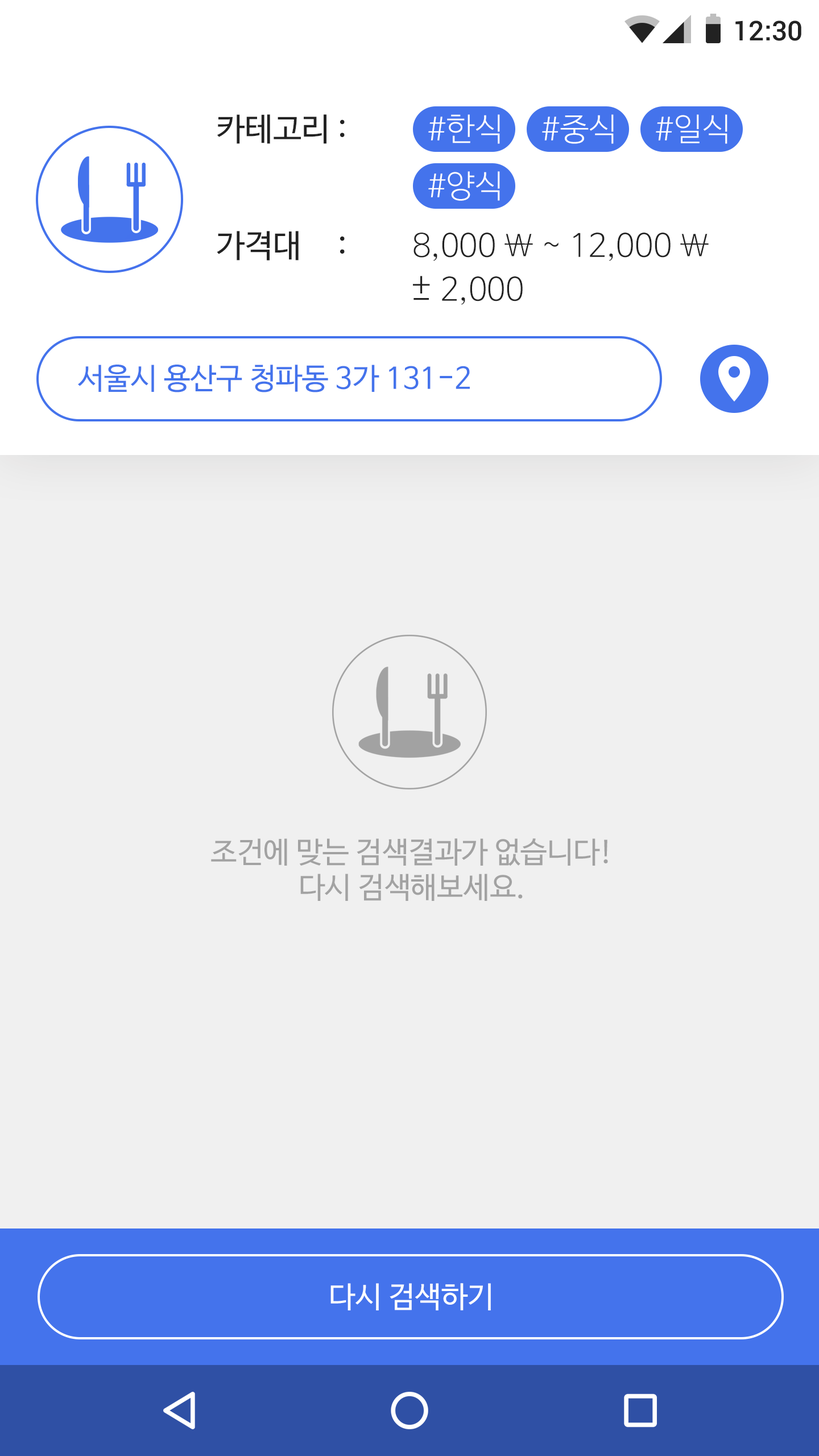
<style>
.page{position:relative;width:819px;height:1456px;background:#f0f0f0}
.page>*{position:absolute;margin:0}
.t1{font:27.3px "Roboto-Medium";color:#222222}
.t2{font:31.8px "NanumBarunGothic";color:#222222}
.t3{font:31.8px "NanumBarunGothicLight";color:#ffffff}
.t4{font:31.8px "NanumBarunGothicLight";color:#222222}
.t5{font:36.4px "NanumBarunGothicLight";color:#222222}
.t6{font:29.6px "NanumBarunGothic";color:#4473ec}
.t7{font:29.6px "NanumBarunGothic";color:#a2a2a2}
.t8{font:29.6px "NanumBarunGothic";color:#ffffff}
</style>
<div class="page">
<p class="t1" style="left:735px;top:20px;width:66px;height:21px">12:30</p>
<p class="t2" style="left:217px;top:114px;width:128px;height:30px">카테고리 :</p>
<p class="t3" style="left:428px;top:114px;width:72px;height:30px">#한식</p>
<p class="t3" style="left:542px;top:114px;width:72px;height:30px">#중식</p>
<p class="t3" style="left:656px;top:114px;width:71px;height:30px">#일식</p>
<p class="t3" style="left:428px;top:171px;width:72px;height:30px">#양식</p>
<p class="t2" style="left:217px;top:231px;width:128px;height:29px">가격대     :</p>
<p class="t4" style="left:413px;top:233px;width:296px;height:28px">8,000 \ ~ 12,000 \</p>
<p class="t5" style="left:413px;top:276px;width:17px;height:17px">+</p>
<p class="t4" style="left:442px;top:276px;width:81px;height:29px">2,000</p>
<p class="t5" style="left:413px;top:298px;width:16px;height:2px">-</p>
<p class="t6" style="left:78px;top:365px;width:392px;height:27px">서울시 용산구 청파동 3가 131-2</p>
<p class="t7" style="left:211px;top:838px;width:397px;height:63px;text-align:center">조건에 맞는 검색결과가 없습니다!<br>다시 검색해보세요.</p>
<p class="t8" style="left:330px;top:1283px;width:161px;height:27px">다시 검색하기</p>
</div>
